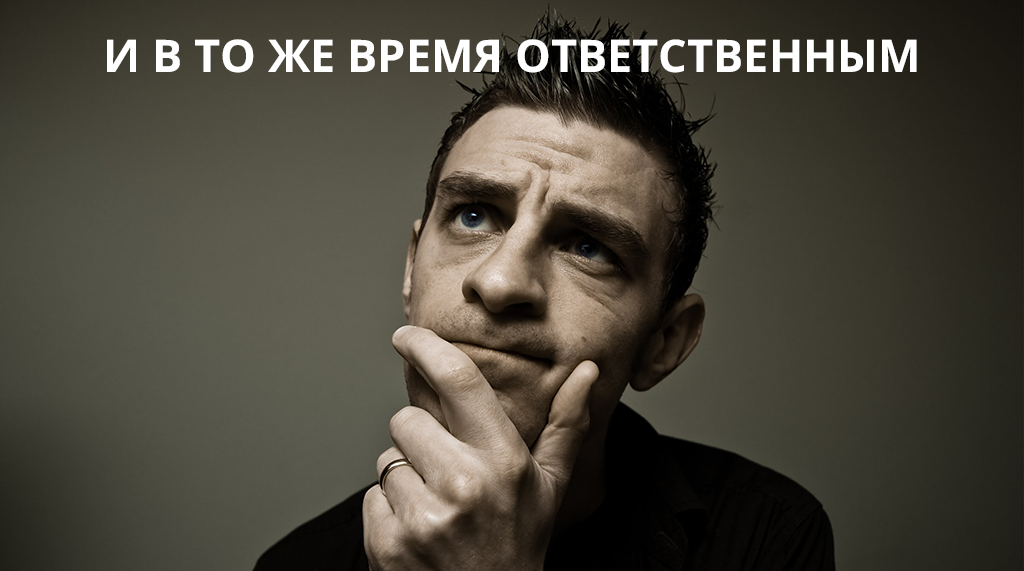
<style>
.page{position:relative;width:1024px;height:571px}
.page>*{position:absolute;margin:0}
.t1{font:45px "OpenSans-Bold";color:#ffffff;text-transform:uppercase}
</style>
<div class="page">
<p class="t1" style="left:107px;top:39px;width:810px;height:34px">И в то же время ответственным</p>
</div>
